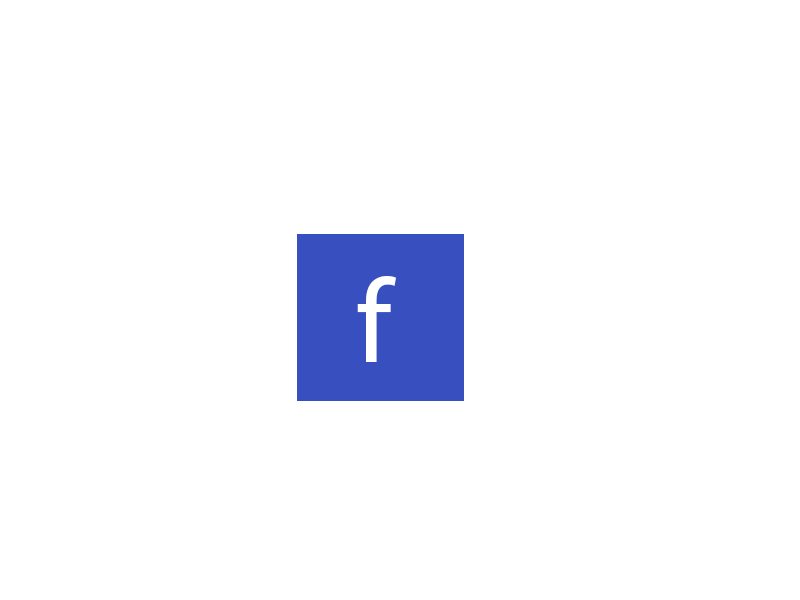
<style>
.page{position:relative;width:800px;height:600px;background:#ffffff}
.page>*{position:absolute;margin:0}
.t1{font:120px "MyriadPro-Regular";color:#ffffff}
</style>
<div class="page">
<p class="t1" style="left:357px;top:276px;width:39px;height:86px">f</p>
</div>
